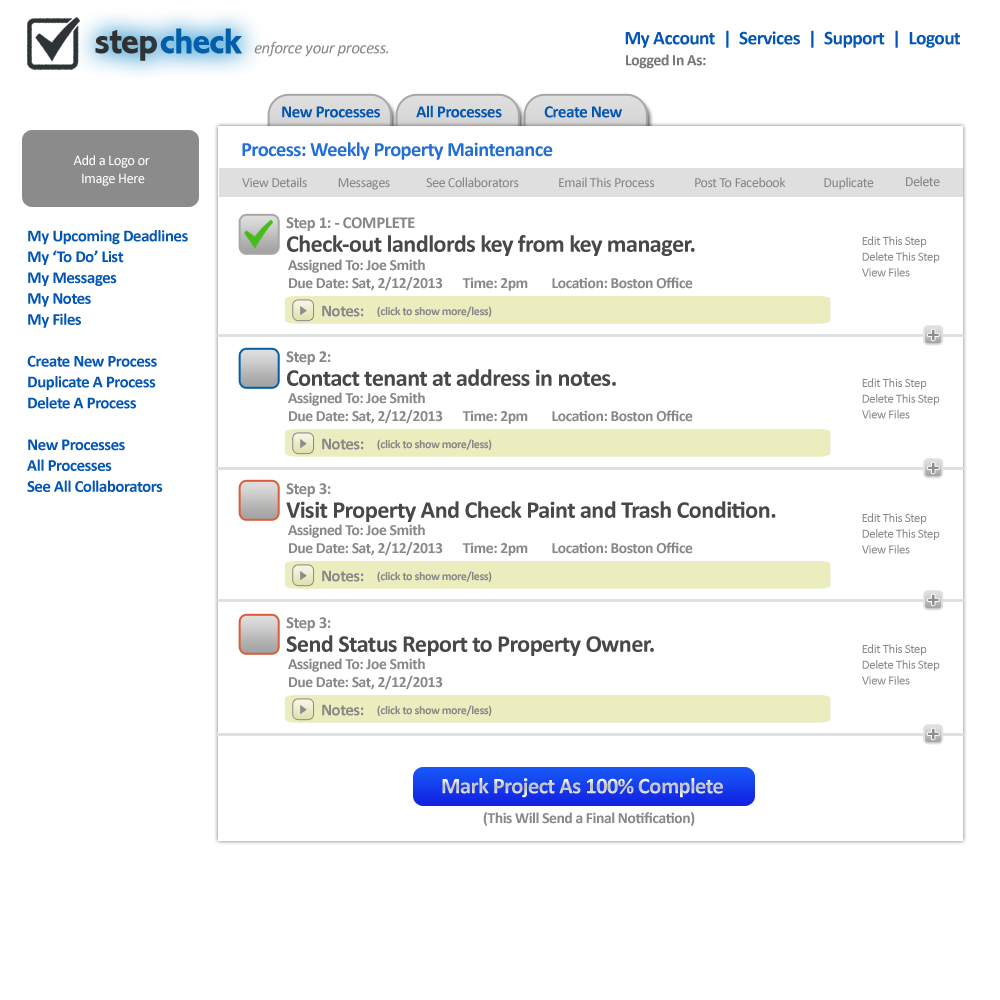
<style>
.page{position:relative;width:1000px;height:1000px;background:#ffffff}
.page>*{position:absolute;margin:0}
.t1{font:19.2px "Calibri-Bold";letter-spacing:-0.025em;color:#0456b3}
.t2{font:16.8px "Calibri-Italic";letter-spacing:-0.025em;color:#888888}
.t3{font:15.7px "Calibri-Bold";letter-spacing:-0.025em;color:#777777}
.t4{font:17px "Calibri-Bold";letter-spacing:-0.025em;color:#0456b3}
.t5{font:20.3px "Calibri-Bold";letter-spacing:-0.025em;color:#226fd7}
.t6{font:13.9px "Calibri";letter-spacing:-0.025em;color:#888888}
.t7{font:16.8px "Calibri-Bold";letter-spacing:-0.025em;color:#888888}
.t8{font:16.8px/20.9px "Calibri-Bold";letter-spacing:-0.025em;color:#0456b3}
.t9{font:24.3px "Calibri-Bold";letter-spacing:-0.025em;color:#484848}
.t10{font:12.6px/15.7px "Calibri";letter-spacing:-0.025em;color:#888888}
.t11{font:15.5px "Calibri-Bold";letter-spacing:-0.025em;color:#888888}
.t12{font:22.5px "Calibri-Bold";letter-spacing:-0.025em;color:#d0d0d0}
</style>
<div class="page">
<p class="t1" style="left:625px;top:30px;width:335px;height:18px">My Account  |  Services  |  Support  |  Logout</p>
<p class="t2" style="left:254px;top:41px;width:134px;height:16px">enforce your process.</p>
<p class="t3" style="left:626px;top:54px;width:80px;height:15px">Logged In As:</p>
<p class="t4" style="left:282px;top:106px;width:98px;height:12px">New Processes</p>
<p class="t4" style="left:416px;top:105px;width:86px;height:13px">All Processes</p>
<p class="t4" style="left:544px;top:106px;width:78px;height:12px">Create New</p>
<p class="t5" style="left:242px;top:142px;width:311px;height:18px">Process: Weekly Property Maintenance</p>
<p class="t6" style="left:242px;top:177px;width:65px;height:11px">View Details</p>
<p class="t6" style="left:338px;top:178px;width:52px;height:12px">Messages</p>
<p class="t6" style="left:426px;top:177px;width:93px;height:11px">See Collaborators</p>
<p class="t6" style="left:559px;top:177px;width:95px;height:11px">Email This Process</p>
<p class="t6" style="left:695px;top:177px;width:91px;height:11px">Post To Facebook</p>
<p class="t6" style="left:824px;top:177px;width:50px;height:13px">Duplicate</p>
<p class="t6" style="left:906px;top:176px;width:34px;height:11px">Delete</p>
<p class="t7" style="left:286px;top:217px;width:129px;height:14px">Step 1: - COMPLETE</p>
<p class="t8" style="left:27px;top:230px;width:161px;height:262px">My Upcoming Deadlines<br>My ‘To Do’ List<br>My Messages<br>My Notes<br>My Files<br><br>Create New Process<br>Duplicate A Process<br>Delete A Process<br><br>New Processes<br>All Processes<br>See All Collaborators</p>
<p class="t9" style="left:287px;top:235px;width:408px;height:21px">Check-out landlords key from key manager.</p>
<p class="t10" style="left:862px;top:236px;width:78px;height:41px">Edit This Step<br>Delete This Step<br>View Files</p>
<p class="t11" style="left:288px;top:259px;width:137px;height:14px">Assigned To: Joe Smith</p>
<p class="t11" style="left:289px;top:276px;width:154px;height:15px">Due Date: Sat, 2/12/2013</p>
<p class="t11" style="left:462px;top:277px;width:66px;height:14px">Time: 2pm</p>
<p class="t11" style="left:552px;top:277px;width:141px;height:12px">Location: Boston Office</p>
<p class="t7" style="left:286px;top:351px;width:45px;height:14px">Step 2:</p>
<p class="t9" style="left:287px;top:369px;width:329px;height:17px">Contact tenant at address in notes.</p>
<p class="t10" style="left:862px;top:378px;width:78px;height:41px">Edit This Step<br>Delete This Step<br>View Files</p>
<p class="t11" style="left:288px;top:392px;width:137px;height:14px">Assigned To: Joe Smith</p>
<p class="t11" style="left:289px;top:409px;width:154px;height:15px">Due Date: Sat, 2/12/2013</p>
<p class="t11" style="left:462px;top:410px;width:66px;height:14px">Time: 2pm</p>
<p class="t11" style="left:552px;top:410px;width:141px;height:12px">Location: Boston Office</p>
<p class="t7" style="left:286px;top:483px;width:45px;height:14px">Step 3:</p>
<p class="t9" style="left:286px;top:501px;width:490px;height:21px">Visit Property And Check Paint and Trash Condition.</p>
<p class="t10" style="left:862px;top:513px;width:78px;height:41px">Edit This Step<br>Delete This Step<br>View Files</p>
<p class="t11" style="left:288px;top:524px;width:137px;height:14px">Assigned To: Joe Smith</p>
<p class="t11" style="left:289px;top:541px;width:154px;height:15px">Due Date: Sat, 2/12/2013</p>
<p class="t11" style="left:462px;top:542px;width:66px;height:14px">Time: 2pm</p>
<p class="t11" style="left:552px;top:542px;width:141px;height:12px">Location: Boston Office</p>
<p class="t7" style="left:286px;top:617px;width:45px;height:14px">Step 3:</p>
<p class="t9" style="left:286px;top:635px;width:368px;height:21px">Send Status Report to Property Owner.</p>
<p class="t10" style="left:862px;top:644px;width:78px;height:41px">Edit This Step<br>Delete This Step<br>View Files</p>
<p class="t11" style="left:288px;top:658px;width:137px;height:14px">Assigned To: Joe Smith</p>
<p class="t11" style="left:289px;top:675px;width:154px;height:15px">Due Date: Sat, 2/12/2013</p>
<p class="t12" style="left:442px;top:778px;width:281px;height:20px">Mark Project As 100% Complete</p>
<p class="t11" style="left:483px;top:812px;width:212px;height:14px">(This Will Send a Final Notification)</p>
</div>
